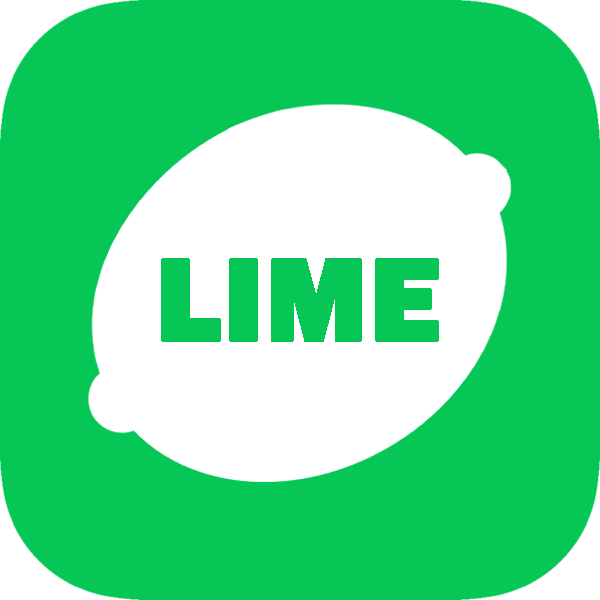
<style>
.page{position:relative;width:600px;height:600px;background:#06c755}
.page>*{position:absolute;margin:0}
.t1{font:120px "FranklinGothic-Heavy";color:#06c755;font-weight:bold}
</style>
<div class="page">
<p class="t1" style="left:161px;top:258px;width:278px;height:84px">LIME</p>
</div>
